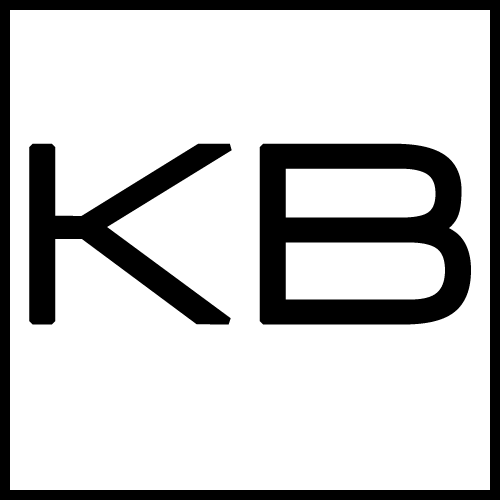
<style>
.page{position:relative;width:500px;height:500px;background:#ffffff}
.page>*{position:absolute;margin:0}
.t1{font:250px "Federation";color:#000000;font-weight:bold}
</style>
<div class="page">
<p class="t1" style="left:29px;top:143px;width:442px;height:182px">KB</p>
</div>
